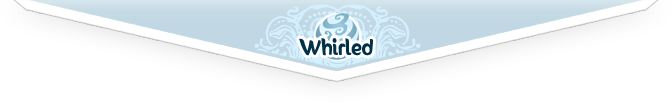
<style>
.page{position:relative;width:672px;height:103px;background:#ffffff}
.page>*{position:absolute;margin:0}
.t1{font:18px "SunnySide";color:#013148}
</style>
<div class="page">
<p class="t1" style="left:299px;top:38px;width:74px;height:18px">Whirled</p>
</div>
